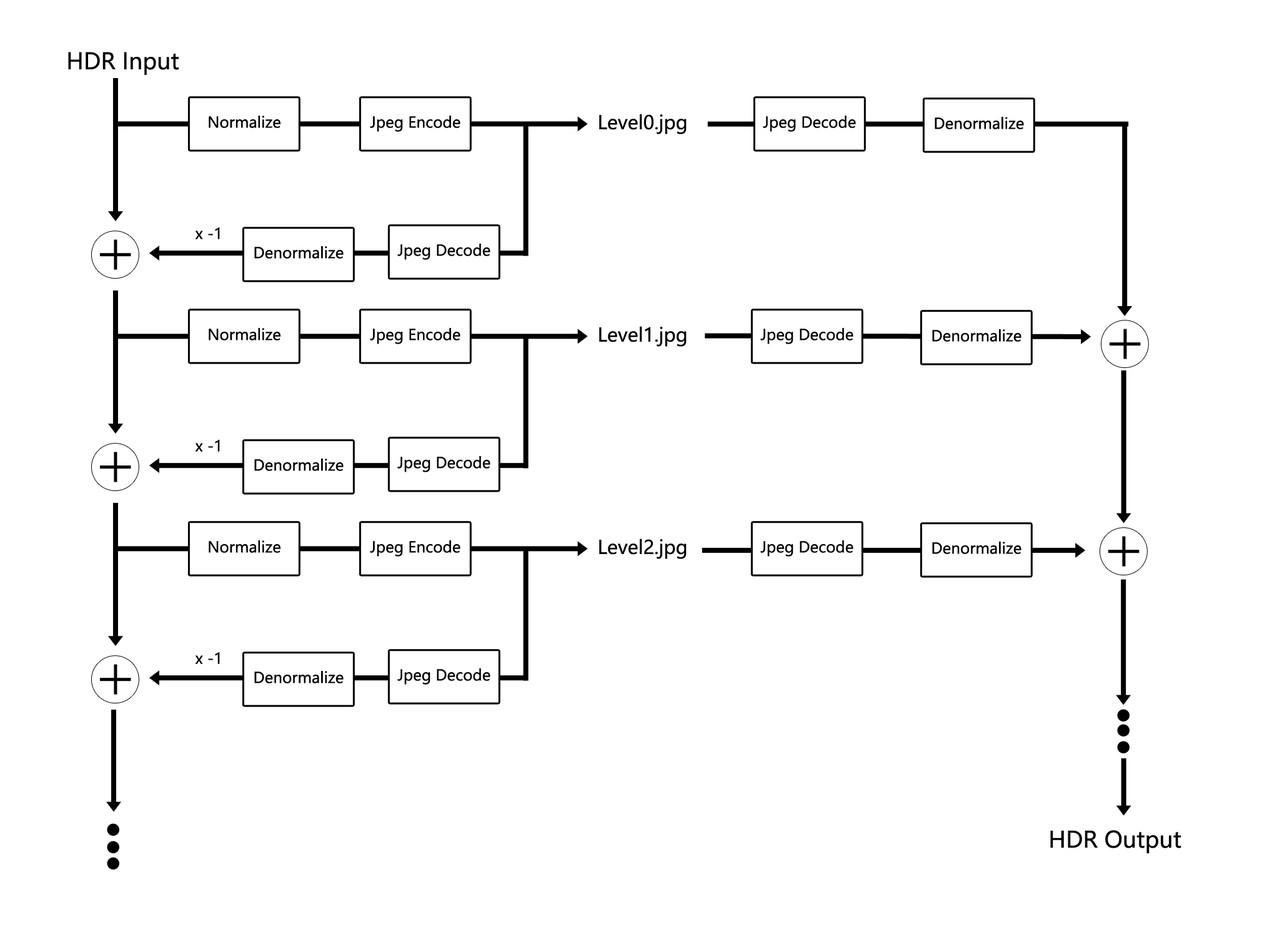
<style>
.page{position:relative;width:1272px;height:937px;background:#ffffff}
.page>*{position:absolute;margin:0}
.t1{font:22.5px "MicrosoftYaHei";color:#000000}
.t2{font:18.7px "MicrosoftYaHei";color:#000000}
.t3{font:15px "MicrosoftYaHei";color:#000000}
</style>
<div class="page">
<p class="t1" style="left:68px;top:52px;width:111px;height:23px">HDR Input</p>
<p class="t2" style="left:599px;top:114px;width:88px;height:20px">Level0.jpg</p>
<p class="t3" style="left:209px;top:116px;width:72px;height:12px">Normalize</p>
<p class="t3" style="left:370px;top:116px;width:91px;height:16px">Jpeg Encode</p>
<p class="t3" style="left:763px;top:116px;width:93px;height:16px">Jpeg Decode</p>
<p class="t3" style="left:935px;top:117px;width:89px;height:12px">Denormalize</p>
<p class="t3" style="left:195px;top:227px;width:25px;height:12px">x -1</p>
<p class="t3" style="left:397px;top:244px;width:94px;height:16px">Jpeg Decode</p>
<p class="t3" style="left:254px;top:246px;width:90px;height:13px">Denormalize</p>
<p class="t3" style="left:209px;top:328px;width:72px;height:13px">Normalize</p>
<p class="t3" style="left:370px;top:328px;width:91px;height:16px">Jpeg Encode</p>
<p class="t2" style="left:599px;top:326px;width:88px;height:21px">Level1.jpg</p>
<p class="t3" style="left:760px;top:328px;width:94px;height:16px">Jpeg Decode</p>
<p class="t3" style="left:932px;top:329px;width:90px;height:13px">Denormalize</p>
<p class="t3" style="left:195px;top:440px;width:25px;height:12px">x -1</p>
<p class="t3" style="left:254px;top:459px;width:90px;height:12px">Denormalize</p>
<p class="t3" style="left:397px;top:456px;width:94px;height:16px">Jpeg Decode</p>
<p class="t3" style="left:209px;top:541px;width:72px;height:12px">Normalize</p>
<p class="t3" style="left:370px;top:541px;width:91px;height:16px">Jpeg Encode</p>
<p class="t2" style="left:599px;top:539px;width:88px;height:20px">Level2.jpg</p>
<p class="t3" style="left:760px;top:541px;width:94px;height:16px">Jpeg Decode</p>
<p class="t3" style="left:932px;top:542px;width:90px;height:12px">Denormalize</p>
<p class="t3" style="left:195px;top:652px;width:25px;height:12px">x -1</p>
<p class="t3" style="left:254px;top:671px;width:90px;height:13px">Denormalize</p>
<p class="t3" style="left:397px;top:669px;width:94px;height:16px">Jpeg Decode</p>
<p class="t1" style="left:1050px;top:830px;width:132px;height:24px">HDR Output</p>
</div>
